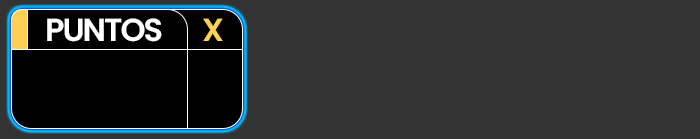
<style>
.page{position:relative;width:700px;height:139px;background:#333333}
.page>*{position:absolute;margin:0}
.t1{font:31.9px "Poppins-SemiBold";letter-spacing:-0.06em;color:#ffffff;text-transform:uppercase}
.t2{font:31.9px "Poppins-SemiBold";letter-spacing:-0.06em;color:#ffd052;text-transform:uppercase}
</style>
<div class="page">
<p class="t1" style="left:47px;top:18px;width:115px;height:24px">Puntos</p>
<p class="t2" style="left:203px;top:18px;width:20px;height:23px">x</p>
</div>
